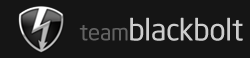
<style>
.page{position:relative;width:250px;height:58px;background:#151515}
.page>*{position:absolute;margin:0}
.t1{font:30.4px "NeoSansIntel";color:#cdcdcd}
.t2{font:22.8px "NeoSansIntel";color:#626262}
</style>
<div class="page">
<p class="t1" style="left:79px;top:17px;width:164px;height:24px"><span class="t2">team</span>blackbolt</p>
</div>
